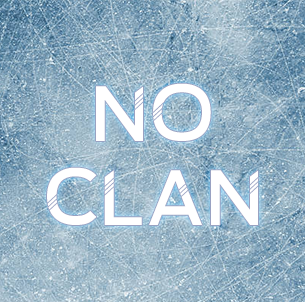
<style>
.page{position:relative;width:305px;height:302px}
.page>*{position:absolute;margin:0}
.t1{font:70px "VikingsFont";color:#ffffff}
</style>
<div class="page">
<p class="t1" style="left:47px;top:83px;width:211px;height:142px;text-align:center">NO<br>CLAN</p>
</div>
